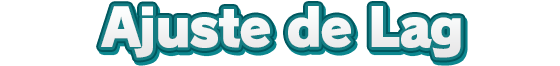
<style>
.page{position:relative;width:560px;height:66px;background:#ffffff}
.page>*{position:absolute;margin:0}
.t1{font:52px "RodinPro-UB";letter-spacing:-0.039em;color:#f2f2f3}
</style>
<div class="page">
<p class="t1" style="left:101px;top:6px;width:360px;height:52px">Ajuste de Lag</p>
</div>
